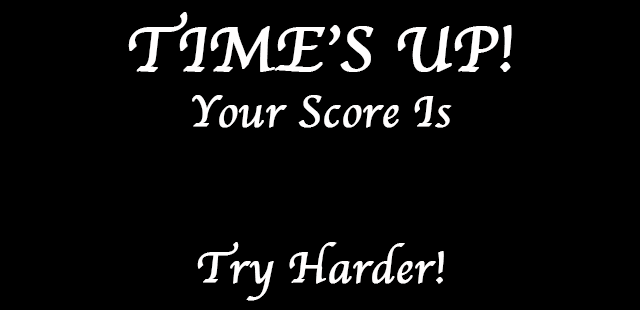
<style>
.page{position:relative;width:640px;height:310px;background:#000000}
.page>*{position:absolute;margin:0}
.t1{font:65px "Apple-Chancery";color:#fffefe;font-weight:bold}
.t2{font:45px "Apple-Chancery";color:#fffefe;font-weight:bold}
</style>
<div class="page">
<p class="t1" style="left:128px;top:12px;width:384px;height:60px">TIME’S UP!</p>
<p class="t2" style="left:192px;top:95px;width:260px;height:33px">Your Score Is</p>
<p class="t2" style="left:197px;top:242px;width:247px;height:59px">Try Harder!</p>
</div>
